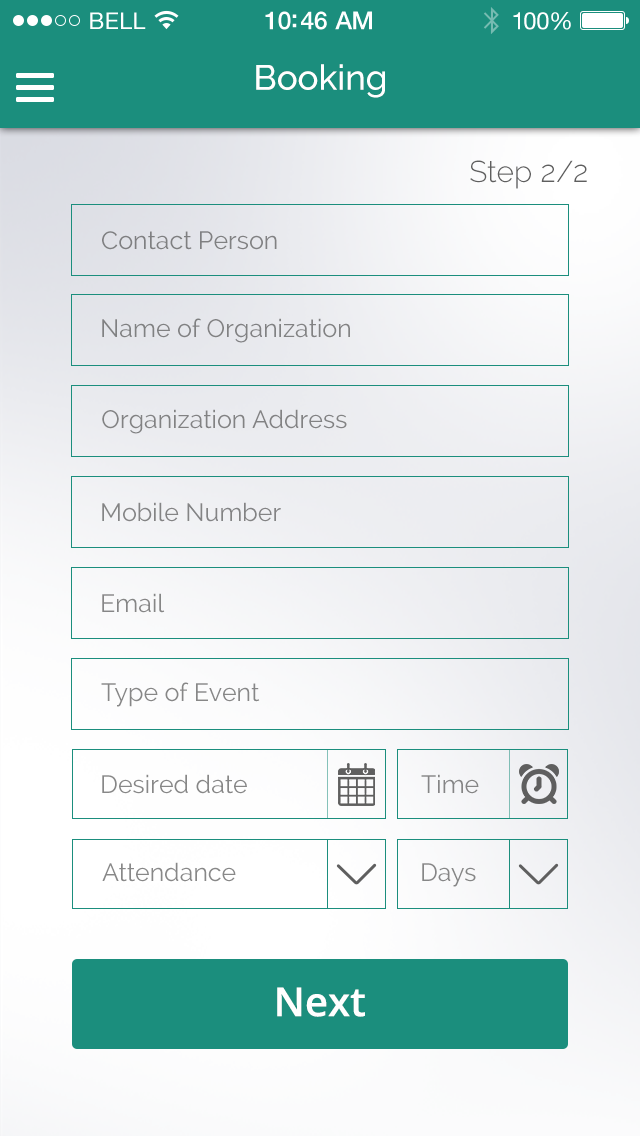
<style>
.page{position:relative;width:640px;height:1136px}
.page>*{position:absolute;margin:0}
.t1{font:23px "HelveticaNeue";letter-spacing:0.02em;color:#ffffff}
.t2{font:25px "HelveticaNeue-Medium";letter-spacing:-0.02em;color:#ffffff}
.t3{font:24px "HelveticaNeue";letter-spacing:-0.02em;color:#ffffff}
.t4{font:35px "Raleway-Medium";color:#ffffff}
.t5{font:30px "Raleway-Light";color:#5f5f5f}
.t6{font:25px "Raleway-Regular";color:#808081}
.t7{font:25px "Raleway-Regular";color:#818183}
.t8{font:25px "Raleway-Regular";color:#828283}
.t9{font:25px "Raleway-Regular";color:#848485}
.t10{font:25px "Raleway-Regular";color:#868686}
.t11{font:25px "Raleway-Regular";color:#878787}
.t12{font:25px "Raleway-Regular";color:#858586}
.t13{font:25px "Raleway-Regular";color:#888888}
.t14{font:40px "OpenSans-Semibold";color:#ffffff}
</style>
<div class="page">
<p class="t1" style="left:90px;top:12px;width:56px;height:17px">BELL</p>
<p class="t2" style="left:265px;top:11px;width:107px;height:19px">10:46 AM</p>
<p class="t3" style="left:513px;top:12px;width:58px;height:18px">100%</p>
<p class="t4" style="left:256px;top:64px;width:129px;height:34px">Booking</p>
<p class="t5" style="left:470px;top:160px;width:117px;height:29px">Step 2/2</p>
<p class="t6" style="left:102px;top:231px;width:175px;height:19px">Contact Person</p>
<p class="t7" style="left:102px;top:318px;width:248px;height:25px">Name of Organization</p>
<p class="t8" style="left:102px;top:409px;width:245px;height:25px">Organization Address</p>
<p class="t9" style="left:102px;top:502px;width:179px;height:20px">Mobile Number</p>
<p class="t10" style="left:102px;top:593px;width:63px;height:20px">Email</p>
<p class="t11" style="left:101px;top:682px;width:159px;height:25px">Type of Event</p>
<p class="t11" style="left:102px;top:774px;width:145px;height:20px">Desired date</p>
<p class="t12" style="left:421px;top:774px;width:58px;height:20px">Time</p>
<p class="t13" style="left:102px;top:862px;width:134px;height:20px">Attendance</p>
<p class="t10" style="left:422px;top:863px;width:54px;height:24px">Days</p>
<p class="t14" style="left:277px;top:987px;width:88px;height:30px">Next</p>
</div>
